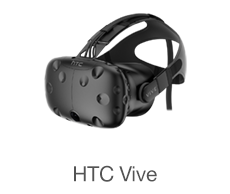
<style>
.page{position:relative;width:230px;height:194px;background:#ffffff}
.page>*{position:absolute;margin:0}
.t1{font:21px "HelveticaNeue";letter-spacing:-0.015em;color:#545454}
</style>
<div class="page">
<p class="t1" style="left:74px;top:165px;width:83px;height:17px">HTC Vive</p>
</div>
